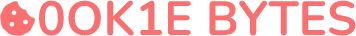
<style>
.page{position:relative;width:356px;height:36px;background:#ffffff}
.page>*{position:absolute;margin:0}
.t1{font:48px "Nunito-Bold";color:#fa7070}
</style>
<div class="page">
<p class="t1" style="left:39px;top:0px;width:317px;height:36px">0OK1E BYTES</p>
</div>
